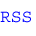
<style>
.page{position:relative;width:36px;height:36px;background:#ffffff}
.page>*{position:absolute;margin:0}
.t1{font:17.9px "Courier";color:#0000ff}
</style>
<div class="page">
<p class="t1" style="left:0px;top:11px;width:31px;height:12px">RSS</p>
</div>
